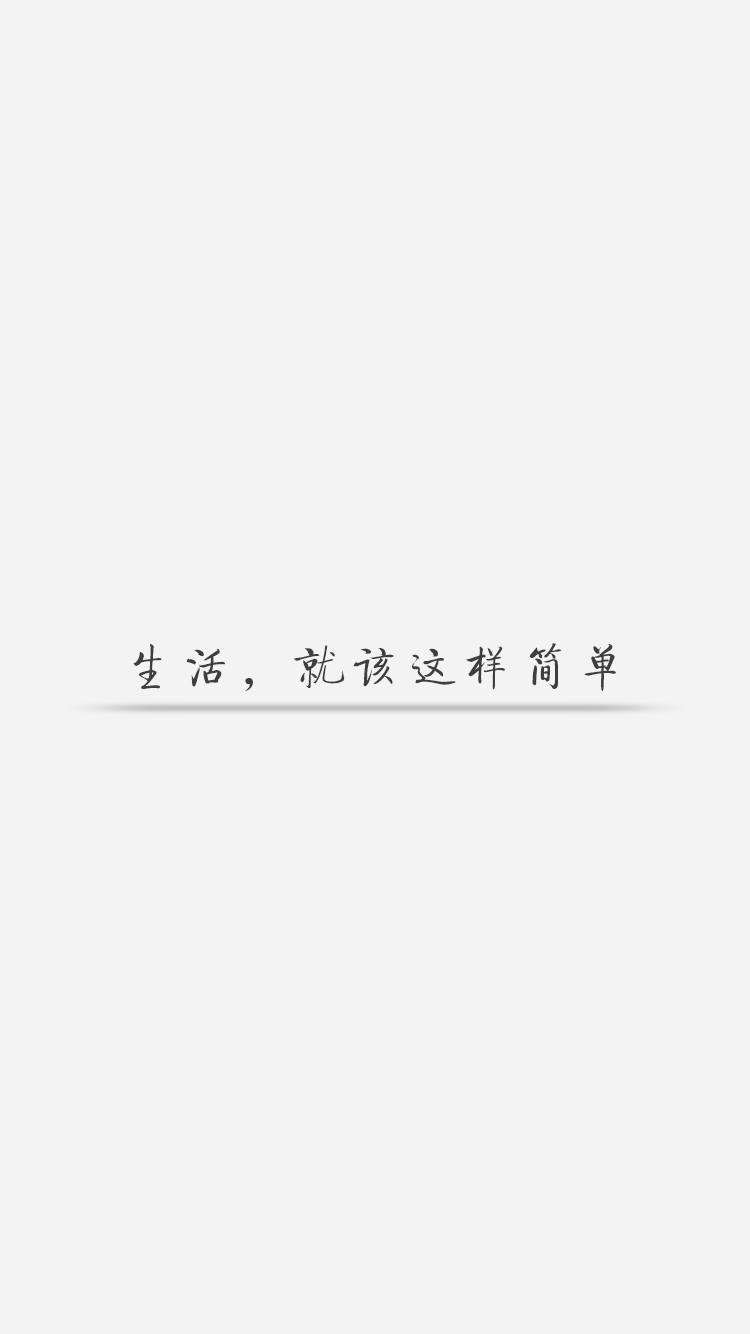
<style>
.page{position:relative;width:750px;height:1334px;background:#f3f3f3}
.page>*{position:absolute;margin:0}
.t1{font:50px "JQiTi";letter-spacing:0.1em;color:#3f3e3e;scale:1.03 1}
</style>
<div class="page">
<p class="t1" style="left:133px;top:643px;width:483px;height:49px">生活，就该这样简单</p>
</div>
